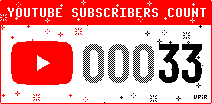
<style>
.page{position:relative;width:212px;height:104px;background:#ffffff}
.page>*{position:absolute;margin:0}
.t1{font:16px "PixelOperatorMono-Bold";color:#ffffff}
.t2{font:56px "BarlowCondensed-SemiBold";color:#000000}
</style>
<div class="page">
<p class="t1" style="left:8px;top:8px;width:198px;height:9px">YOUTUBE SUBSCRIBERS COUNT</p>
<p class="t2" style="left:83px;top:44px;width:119px;height:39px">00033</p>
</div>
